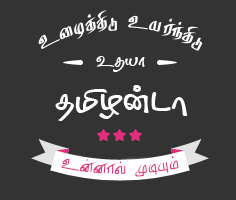
<style>
.page{position:relative;width:236px;height:200px;background:#333333}
.page>*{position:absolute;margin:0}
.t1{font:23.8px "TAM-Tamil042";color:#ffffff;scale:0.93 1}
.t2{font:22px "TAB-Tamil014";color:#ffffff}
.t3{font:53px "TAM-Tamil010";color:#ffffff}
.t4{font:20px "TAM-Tamil042";color:#e02f7a}
</style>
<div class="page">
<p class="t1" style="left:38px;top:10px;width:165px;height:41px">à¬öˆF´ àò˜‰F´</p>
<p class="t2" style="left:96px;top:56px;width:49px;height:16px">àîò£</p>
<p class="t3" style="left:55px;top:85px;width:133px;height:36px">îIö¡ì£</p>
<p class="t4" style="left:61px;top:155px;width:118px;height:22px">à¡ù£™ º®»‹</p>
</div>
